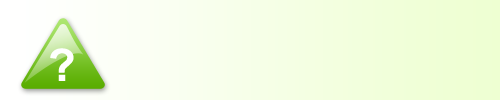
<style>
.page{position:relative;width:500px;height:100px}
.page>*{position:absolute;margin:0}
.t1{font:45px "Arial-BoldMT";color:#ffffff}
</style>
<div class="page">
<p class="t1" style="left:50px;top:48px;width:24px;height:33px">?</p>
</div>
